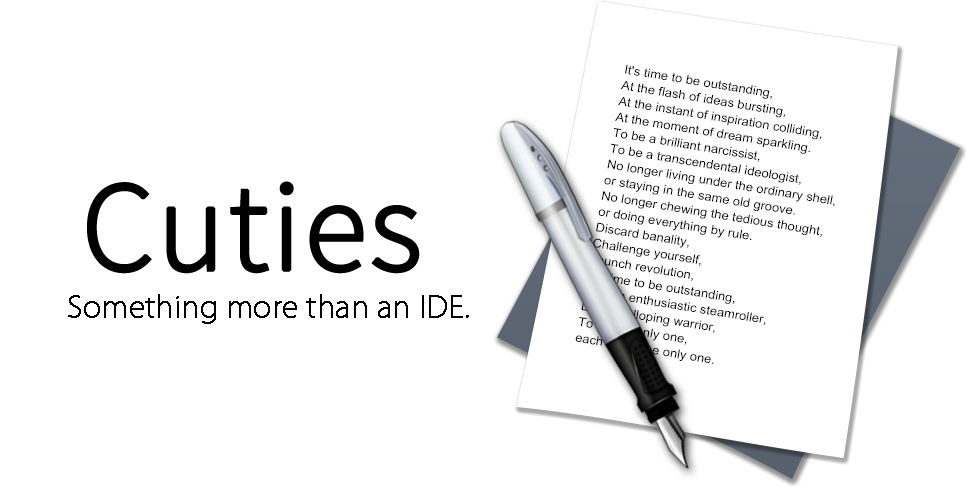
<style>
.page{position:relative;width:968px;height:487px;background:#ffffff}
.page>*{position:absolute;margin:0}
.t1{font:12.3px/16px "ArialMT";color:#000000;scale:1.06 1}
.t2{font:128px "SourceSansPro-Light";color:#000000;font-weight:bold}
.t3{font:29px "KozGoPro-ExtraLight";color:#000000;font-weight:bold}
</style>
<div class="page">
<p class="t1" style="left:575px;top:64px;width:260px;height:300px;rotate:9deg">It's time to be outstanding,<br>At the flash of ideas bursting,<br>At the instant of inspiration colliding,<br>At the moment of dream sparkling.<br>To be a brilliant narcissist,<br>To be a transcendental ideologist,<br>No longer living under the ordinary shell,<br>or staying in the same old groove.<br>No longer chewing the tedious thought,<br>or doing everything by rule.<br>Discard banality,<br>Challenge yourself,<br>Launch revolution,<br>It's time to be outstanding,<br>Like an enthusiastic steamroller,<br>Like a galloping warrior,<br>To be the only one,<br>each of us, the only one.</p>
<p class="t2" style="left:87px;top:181px;width:333px;height:93px">Cuties</p>
<p class="t3" style="left:68px;top:294px;width:401px;height:30px">Something more than an IDE.</p>
</div>
